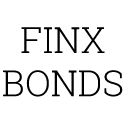
<style>
.page{position:relative;width:128px;height:128px;background:#ffffff}
.page>*{position:absolute;margin:0}
.t1{font:36px "RobotoSlab-Light";color:#0b0700}
</style>
<div class="page">
<p class="t1" style="left:3px;top:27px;width:120px;height:70px;text-align:center">FINX<br>BONDS</p>
</div>
